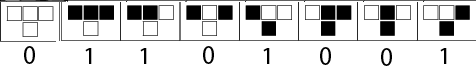
<style>
.page{position:relative;width:476px;height:68px;background:#ffffff}
.page>*{position:absolute;margin:0}
.t1{font:27.6px "MyriadPro-Regular";color:#000000;scale:0.92 1}
.t2{font:24.8px "MyriadPro-Regular";color:#000000}
</style>
<div class="page">
<p class="t1" style="left:24px;top:46px;width:11px;height:18px">0</p>
<p class="t2" style="left:85px;top:48px;width:7px;height:16px">1</p>
<p class="t2" style="left:140px;top:48px;width:7px;height:16px">1</p>
<p class="t1" style="left:203px;top:46px;width:11px;height:18px">0</p>
<p class="t2" style="left:263px;top:48px;width:7px;height:16px">1</p>
<p class="t1" style="left:320px;top:47px;width:11px;height:18px">0</p>
<p class="t1" style="left:381px;top:48px;width:11px;height:18px">0</p>
<p class="t2" style="left:440px;top:48px;width:7px;height:16px">1</p>
</div>
